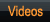
<style>
.page{position:relative;width:50px;height:22px}
.page>*{position:absolute;margin:0}
.t1{font:14px "ArialNarrow";color:#ff9933}
</style>
<div class="page">
<p class="t1" style="left:8px;top:5px;width:35px;height:12px">Videos</p>
</div>
